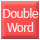
<style>
.page{position:relative;width:40px;height:40px;background:#f64f4f}
.page>*{position:absolute;margin:0}
.t1{font:11.5px "Tahoma";color:#f2e4e4}
</style>
<div class="page">
<p class="t1" style="left:3px;top:8px;width:36px;height:24px;text-align:center">Double<br>Word</p>
</div>
